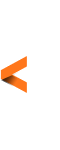
<style>
.page{position:relative;width:60px;height:150px;background:#ffffff}
.page>*{position:absolute;margin:0}
.t1{font:60px "ErasITC-Bold";color:#ff771c}
</style>
<div class="page">
<p class="t1" style="left:0px;top:56px;width:27px;height:37px">&lt;</p>
</div>
